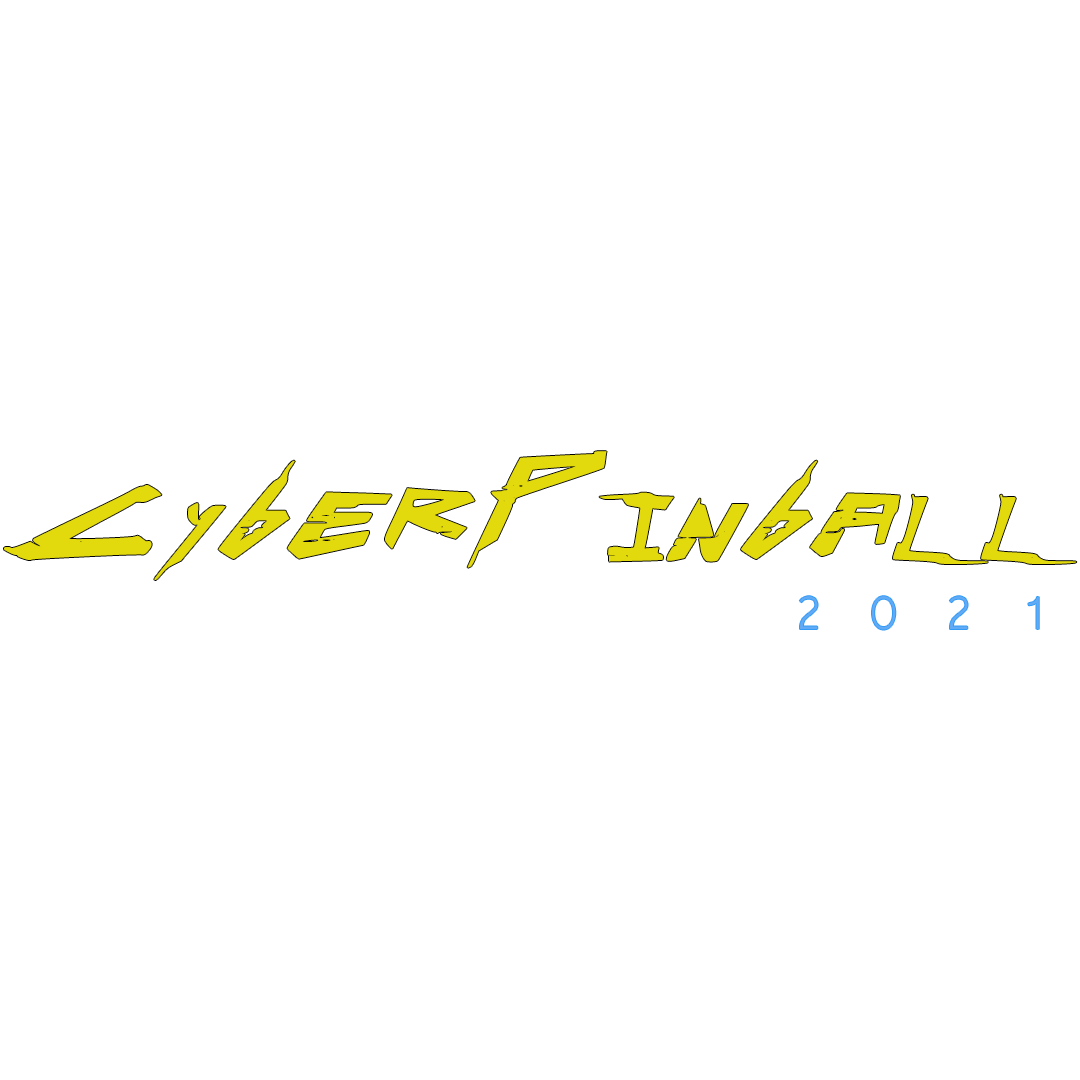
<style>
.page{position:relative;width:1080px;height:1080px;background:#ffffff}
.page>*{position:absolute;margin:0}
.t1{font:149.7px "Cyberpunk-Regular";letter-spacing:-0.16em;color:#e2da0c}
.t2{font:59.9px "Microsoft-Yi-Baiti";letter-spacing:0.74em;color:#62aaf4}
</style>
<div class="page">
<p class="t1" style="left:4px;top:451px;width:1073px;height:129px">CyberPinball</p>
<p class="t2" style="left:799px;top:596px;width:240px;height:34px">2021</p>
</div>
